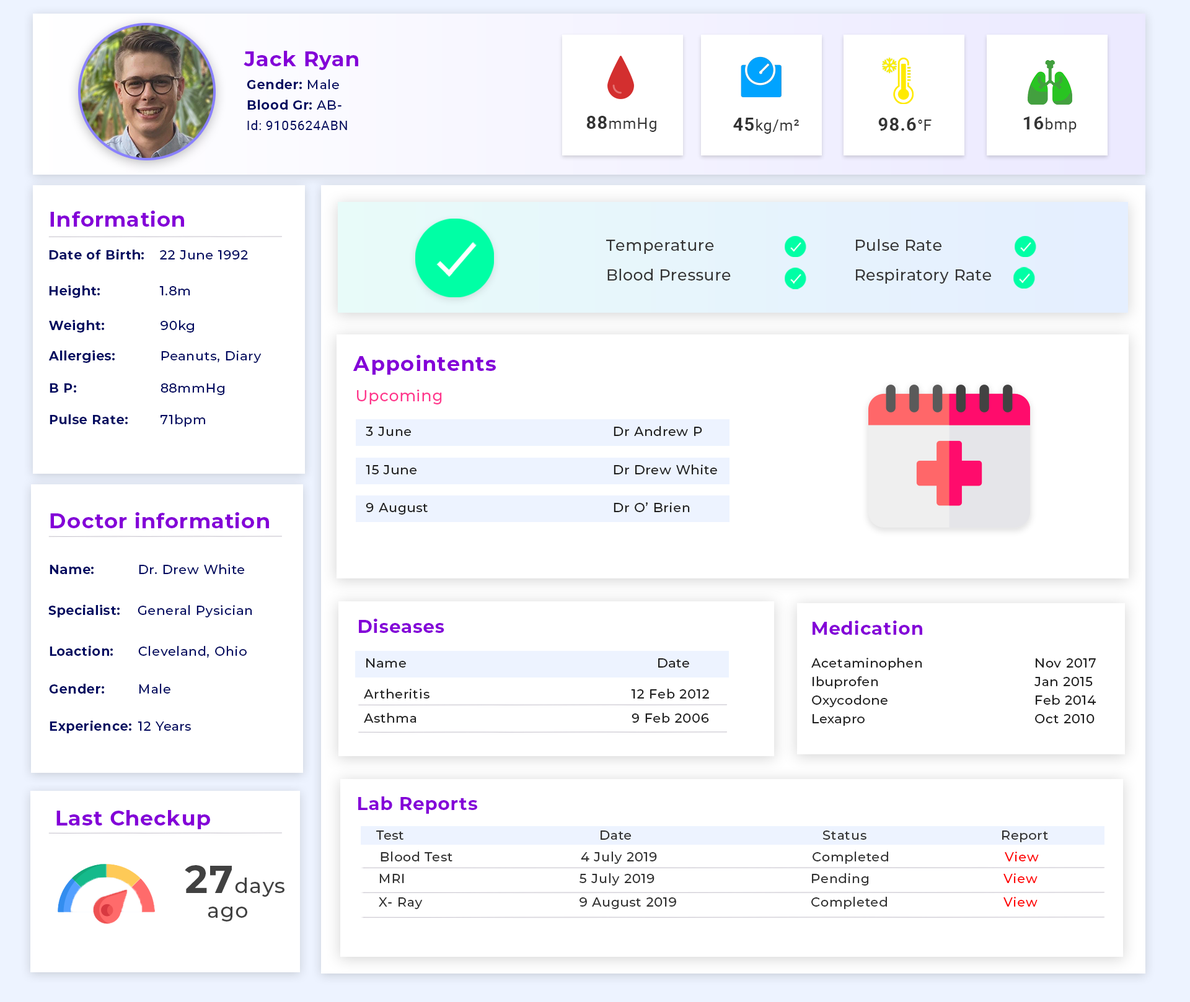
<style>
.page{position:relative;width:1190px;height:1002px;background:#ffffff}
.page>*{position:absolute;margin:0}
.t1{font:20.7px "Montserrat-Bold";letter-spacing:0.036em;color:#8400d8}
.t2{font:12.9px "Montserrat-Bold";letter-spacing:0.036em;color:#000960}
.t3{font:12.9px "Montserrat-Medium";letter-spacing:0.036em;color:#000960}
.t4{font:12.9px "Roboto-Regular";letter-spacing:0.036em;color:#000960}
.t5{font:15.5px "Roboto-Regular";letter-spacing:0.036em;color:#343434}
.t6{font:18.1px "Roboto-Bold";letter-spacing:0.036em;color:#343434}
.t7{font:15.5px/30px "Montserrat-Medium";letter-spacing:0.036em;color:#353535}
.t8{font:15.5px "Montserrat-Medium";letter-spacing:0.036em;color:#ff368d}
.t9{font:12.9px "Montserrat-Medium";letter-spacing:0.036em;color:#202020}
.t10{font:18.1px "Montserrat-Bold";letter-spacing:0.036em;color:#8400d8}
.t11{font:12.9px/18.7px "Montserrat-Medium";letter-spacing:0.036em;color:#202020}
.t12{font:12.9px "Montserrat-Medium";letter-spacing:0.036em;color:#313131}
.t13{font:12.9px "Montserrat-Medium";letter-spacing:0.036em;color:#ff0000}
.t14{font:20.7px "Montserrat-Medium";letter-spacing:0.036em;color:#414141}
.t15{font:38.7px "Montserrat-Bold";letter-spacing:0.036em;color:#414141}
</style>
<div class="page">
<p class="t1" style="left:243px;top:51px;width:115px;height:19px">Jack Ryan</p>
<p class="t2" style="left:247px;top:79px;width:92px;height:10px">Gender: <span class="t3">Male</span></p>
<p class="t2" style="left:247px;top:100px;width:94px;height:10px">Blood Gr:<span class="t3"> AB-</span></p>
<p class="t4" style="left:247px;top:120px;width:100px;height:10px">Id: 9105624ABN</p>
<p class="t5" style="left:586px;top:116px;width:70px;height:16px"><span class="t6">88</span>mmHg</p>
<p class="t5" style="left:733px;top:118px;width:66px;height:16px"><span class="t6">45</span>kg/m²</p>
<p class="t6" style="left:878px;top:118px;width:53px;height:13px">98.6<span class="t5">°F</span></p>
<p class="t5" style="left:1023px;top:116px;width:53px;height:17px"><span class="t6">16</span>bmp</p>
<p class="t1" style="left:50px;top:211px;width:134px;height:16px">Information</p>
<p class="t7" style="left:606px;top:239px;width:385px;height:45px">Temperature      Pulse Rate<br>Blood Pressure     Respiratory Rate</p>
<p class="t2" style="left:49px;top:249px;width:199px;height:11px">Date of Birth: <span class="t3">22 June 1992</span></p>
<p class="t2" style="left:49px;top:285px;width:141px;height:13px">Height:   <span class="t3">1.8m</span></p>
<p class="t2" style="left:49px;top:320px;width:145px;height:13px">Weight:   <span class="t3">90kg</span></p>
<p class="t3" style="left:48px;top:350px;width:213px;height:13px"><span class="t2">Allergies:   </span>Peanuts, Diary</p>
<p class="t1" style="left:353px;top:355px;width:143px;height:20px">Appointents</p>
<p class="t3" style="left:50px;top:384px;width:175px;height:11px"><span class="t2">B P:    </span>88mmHg</p>
<p class="t8" style="left:357px;top:390px;width:85px;height:15px">Upcoming</p>
<p class="t2" style="left:50px;top:414px;width:155px;height:13px">Pulse Rate:  <span class="t3">71bpm</span></p>
<p class="t9" style="left:366px;top:426px;width:336px;height:10px">3 June         Dr Andrew P</p>
<p class="t9" style="left:366px;top:465px;width:351px;height:10px">15 June         Dr Drew White</p>
<p class="t9" style="left:366px;top:502px;width:324px;height:13px">9 August         Dr O’ Brien</p>
<p class="t1" style="left:50px;top:512px;width:219px;height:16px">Doctor information</p>
<p class="t3" style="left:50px;top:564px;width:195px;height:10px"><span class="t2">Name:  </span>Dr. Drew White</p>
<p class="t3" style="left:48px;top:605px;width:204px;height:13px"><span class="t2">Specialist: </span>General Pysician</p>
<p class="t10" style="left:359px;top:619px;width:85px;height:14px">Diseases</p>
<p class="t10" style="left:812px;top:621px;width:110px;height:14px">Medication</p>
<p class="t3" style="left:50px;top:646px;width:197px;height:13px"><span class="t2">Loaction:  </span>Cleveland, Ohio</p>
<p class="t9" style="left:366px;top:659px;width:323px;height:9px">Name            Date</p>
<p class="t11" style="left:811px;top:658px;width:285px;height:68px">Acetaminophen     Nov 2017<br>Ibuprofen       Jan 2015<br>Oxycodone       Feb 2014<br>Lexapro        Oct 2010</p>
<p class="t2" style="left:49px;top:684px;width:121px;height:10px">Gender:  <span class="t3">Male</span></p>
<p class="t9" style="left:364px;top:689px;width:345px;height:10px">Artheritis          12 Feb 2012</p>
<p class="t9" style="left:364px;top:713px;width:345px;height:10px">Asthma          9 Feb 2006</p>
<p class="t2" style="left:50px;top:721px;width:141px;height:13px">Experience: <span class="t3">12 Years</span></p>
<p class="t10" style="left:358px;top:797px;width:119px;height:17px">Lab Reports</p>
<p class="t1" style="left:56px;top:810px;width:154px;height:20px">Last Checkup</p>
<p class="t12" style="left:376px;top:831px;width:672px;height:12px">Test         Date          Status       Report</p>
<p class="t12" style="left:380px;top:852px;width:658px;height:12px">Blood Test       4 July 2019         Completed      <span class="t13">View</span></p>
<p class="t14" style="left:185px;top:866px;width:99px;height:56px"><span class="t15">27</span>days<br> ago</p>
<p class="t12" style="left:379px;top:874px;width:658px;height:12px">MRI         5 July 2019         Pending      <span class="t13">View</span></p>
<p class="t12" style="left:379px;top:897px;width:658px;height:13px">X- Ray         9 August 2019        Completed      <span class="t13">View</span></p>
</div>
